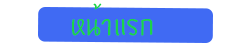
<style>
.page{position:relative;width:250px;height:50px;background:#ffffff}
.page>*{position:absolute;margin:0}
.t1{font:31.1px "BoonJot-Regular";color:#1cd347;scale:0.89 1}
</style>
<div class="page">
<p class="t1" style="left:72px;top:3px;width:81px;height:33px">หน้าแรก</p>
</div>
